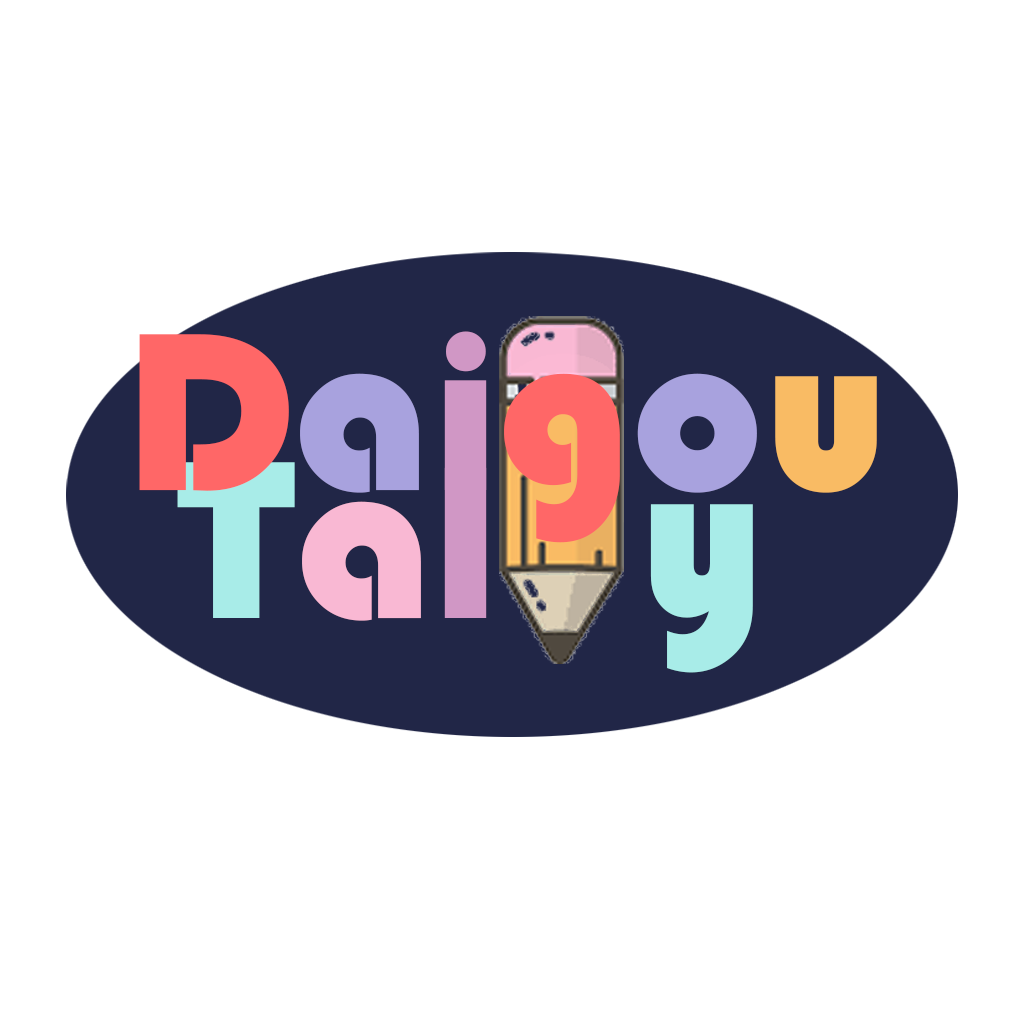
<style>
.page{position:relative;width:1024px;height:1024px;background:#ffffff}
.page>*{position:absolute;margin:0}
.t1{font:233.3px "STHupo";color:#ff6767}
.t2{font:233.3px "STHupo";color:#a8a2de}
.t3{font:225px "STHupo";color:#d097c5}
.t4{font:233.3px "STHupo";color:#f9bb64}
.t5{font:233.3px "STHupo";color:#a8ece8}
.t6{font:233.3px "STHupo";color:#f9b8d3}
</style>
<div class="page">
<p class="t1" style="left:139px;top:331px;width:738px;height:212px">D<span class="t2">a </span><span class="t3">i</span>g<span class="t2">o</span><span class="t4">u</span></p>
<p class="t5" style="left:177px;top:462px;width:576px;height:211px">T<span class="t6">a</span><span class="t3">l </span>y</p>
</div>
